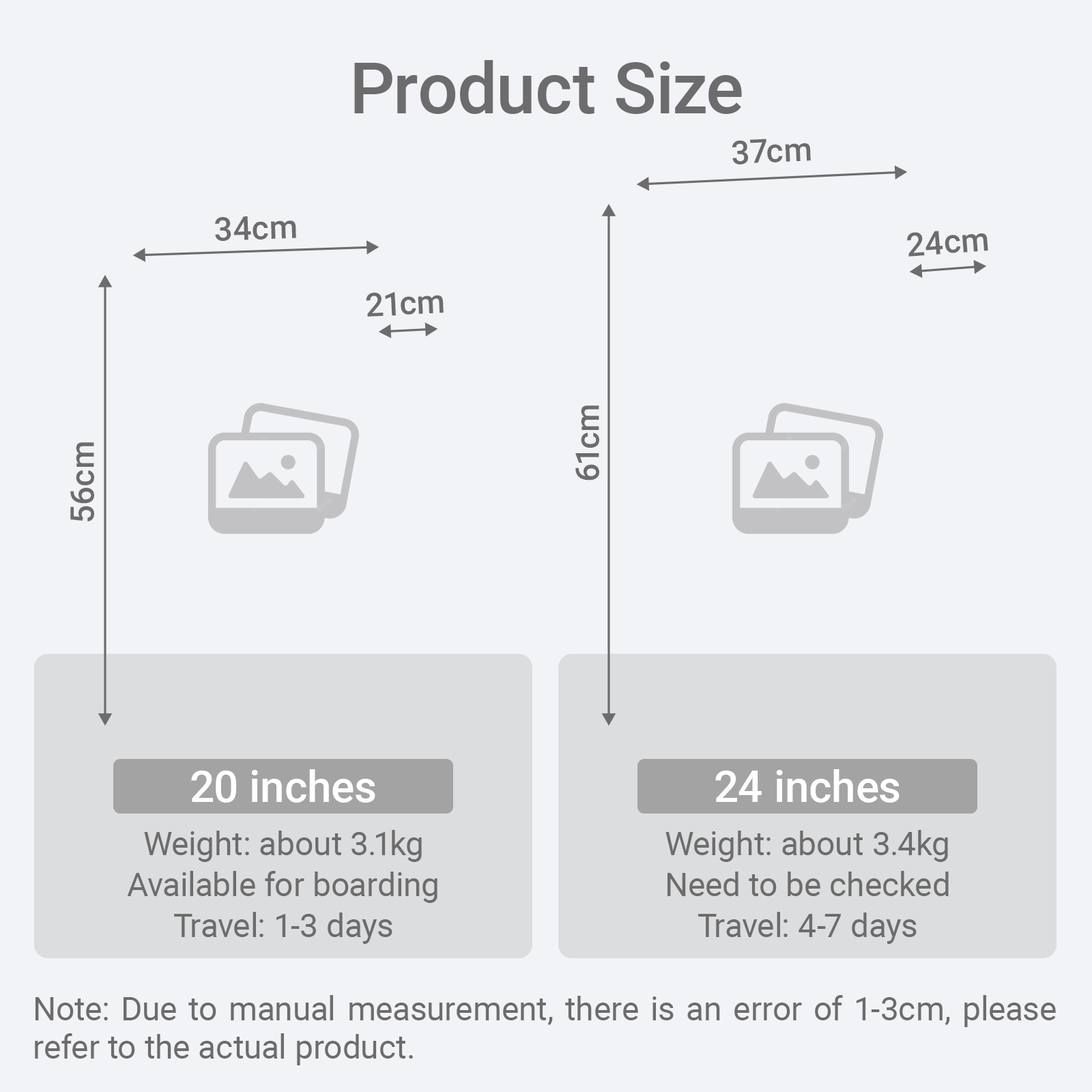
<style>
.page{position:relative;width:1092px;height:1092px;background:#f2f3f6}
.page>*{position:absolute;margin:0}
.t1{font:71px "Roboto-Medium";color:#6c6c6c}
.t2{font:32.8px "Roboto-Medium";color:#6c6c6c}
.t3{font:43.7px "Roboto-Medium";color:#ffffff}
.t4{font:32.8px/40.9px "Roboto-Regular";color:#6c6c6c}
.t5{font:32.8px/38.2px "Roboto-Regular";color:#6c6c6c}
</style>
<div class="page">
<p class="t1" style="left:354px;top:60px;width:388px;height:54px">Product Size</p>
<p class="t2" style="left:732px;top:139px;width:79px;height:25px;rotate:-3deg">37cm</p>
<p class="t2" style="left:215px;top:216px;width:81px;height:25px;rotate:-2deg">34cm</p>
<p class="t2" style="left:907px;top:231px;width:81px;height:26px;rotate:-4deg">24cm</p>
<p class="t2" style="left:366px;top:291px;width:78px;height:26px;rotate:-3deg">21cm</p>
<p class="t2" style="left:575px;top:405px;width:24px;height:75px;rotate:-90deg">61cm</p>
<p class="t2" style="left:70px;top:442px;width:24px;height:79px;rotate:-90deg">56cm</p>
<p class="t3" style="left:191px;top:769px;width:184px;height:34px">20 inches</p>
<p class="t3" style="left:715px;top:769px;width:185px;height:34px">24 inches</p>
<p class="t4" style="left:127px;top:830px;width:310px;height:114px;text-align:center">Weight: about 3.1kg<br>Available for boarding<br>Travel: 1-3 days</p>
<p class="t4" style="left:665px;top:830px;width:284px;height:114px;text-align:center">Weight: about 3.4kg<br>Need to be checked<br>Travel: 4-7 days</p>
<p class="t5" style="left:35px;top:995px;width:1021px;height:70px;text-align:justify">Note: Due to manual measurement, there is an error of 1-3cm, please refer to the actual product.</p>
</div>
